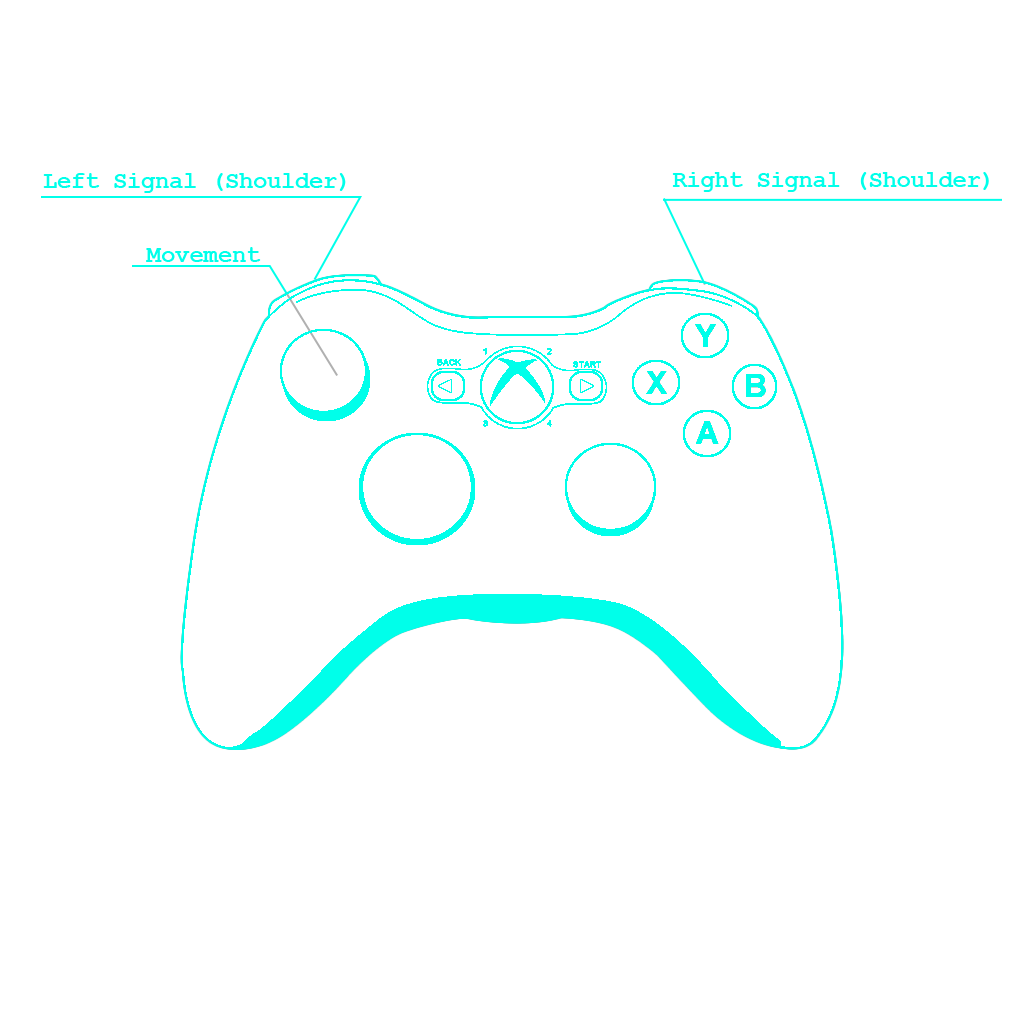
<style>
.page{position:relative;width:1024px;height:1024px;background:#ffffff}
.page>*{position:absolute;margin:0}
.t1{font:24px "CourierNewPS-BoldMT";color:#00ffea}
</style>
<div class="page">
<p class="t1" style="left:43px;top:173px;width:303px;height:20px">Left Signal (Shoulder)</p>
<p class="t1" style="left:672px;top:172px;width:317px;height:20px">Right Signal (Shoulder)</p>
<p class="t1" style="left:146px;top:247px;width:115px;height:15px">Movement</p>
</div>
